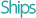
<style>
.page{position:relative;width:36px;height:18px;background:#ffffff}
.page>*{position:absolute;margin:0}
.t1{font:16px "UDShinGoPro-Regular";letter-spacing:-0.08em;color:#26a1a1}
</style>
<div class="page">
<p class="t1" style="left:1px;top:0px;width:35px;height:18px">Ships</p>
</div>
